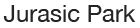
<style>
.page{position:relative;width:140px;height:28px;background:#ffffff}
.page>*{position:absolute;margin:0}
.t1{font:23.8px "HelveticaNeue";color:#242424}
</style>
<div class="page">
<p class="t1" style="left:3px;top:5px;width:133px;height:17px">Jurasic Park</p>
</div>
